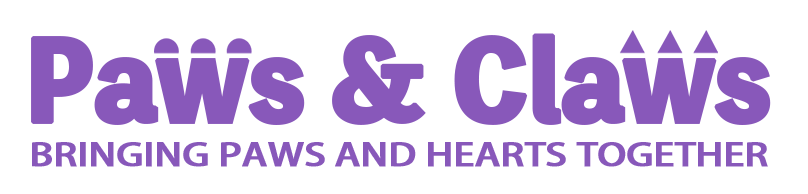
<style>
.page{position:relative;width:808px;height:194px;background:#ffffff}
.page>*{position:absolute;margin:0}
.t1{font:108.1px "ToppanBunkyuMidashiGothicStdN-ExtraBold";letter-spacing:-0.02em;color:#8858ba;font-weight:bold}
.t2{font:31px "AdobeHeitiStd-Regular";letter-spacing:-0.02em;color:#8858ba;font-weight:bold;scale:1.26 1}
</style>
<div class="page">
<p class="t1" style="left:31px;top:33px;width:740px;height:92px">Paws &amp; Claws</p>
<p class="t2" style="left:32px;top:142px;width:736px;height:25px">BRINGING PAWS AND HEARTS TOGETHER</p>
</div>
